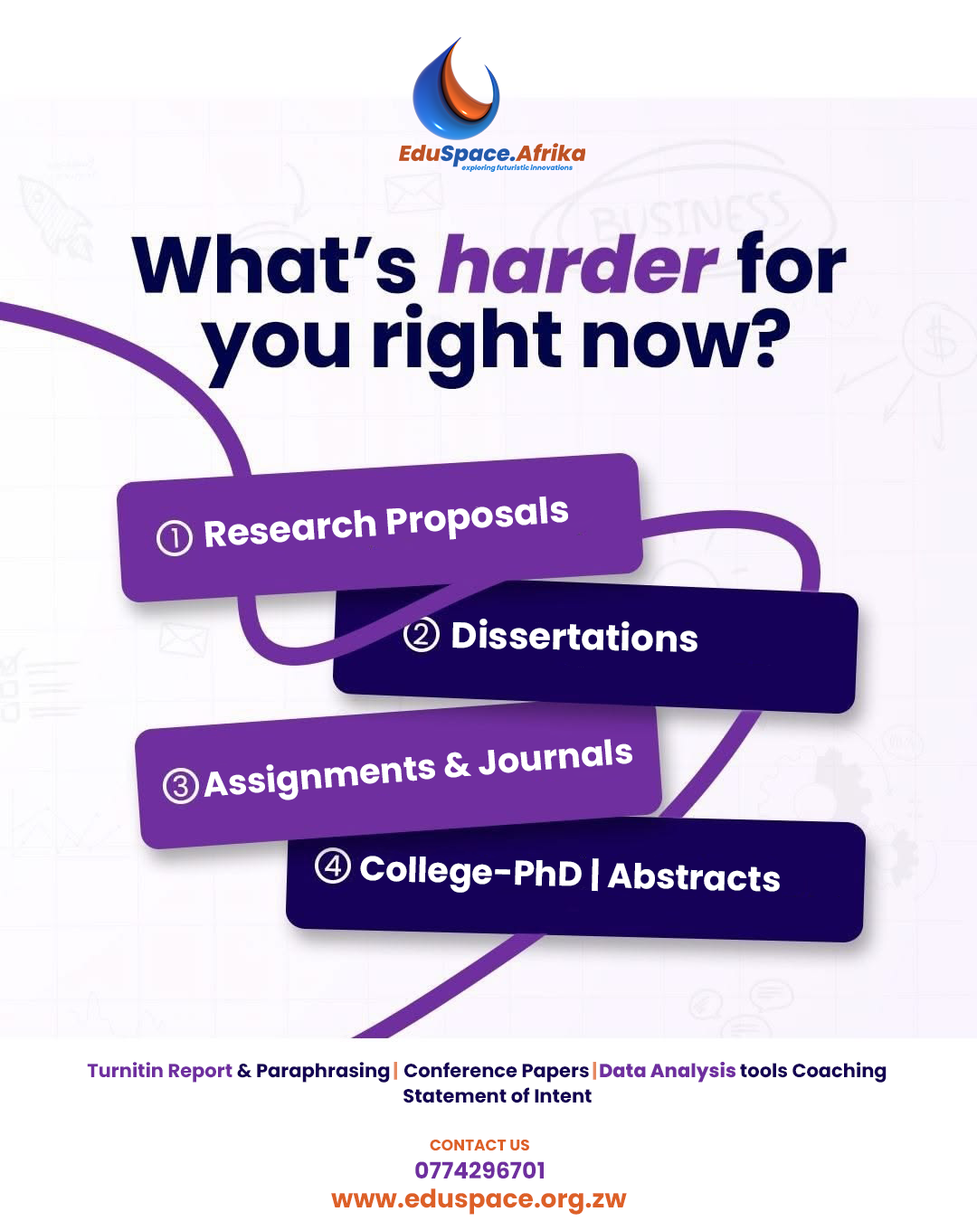
<style>
.page{position:relative;width:977px;height:1221px;background:#ffffff}
.page>*{position:absolute;margin:0}
.t1{font:36.2px "Poppins-Bold";color:#ffffff}
.t2{font:34.4px "Poppins-Bold";color:#ffffff}
.t3{font:19px "Poppins-Bold";color:#6f2f9f}
.t4{font:19px "Poppins-Bold";color:#140153}
.t5{font:19px "Poppins-Bold";color:#e58961}
.t6{font:19px "Poppins-ExtraBold";color:#6f2f9f}
.t7{font:15.4px "Poppins-Bold";color:#dd6027}
.t8{font:22.6px "Poppins-Bold";color:#6f2f9f}
.t9{font:25.3px "Poppins-Bold";color:#dd6027}
</style>
<div class="page">
<p class="t1" style="left:204px;top:496px;width:364px;height:51px;rotate:-4deg">Research Proposals</p>
<p class="t1" style="left:452px;top:619px;width:245px;height:33px;rotate:1deg">Dissertations</p>
<p class="t2" style="left:203px;top:739px;width:429px;height:61px;rotate:-5deg">Assignments &amp; Journals</p>
<p class="t2" style="left:360px;top:856px;width:420px;height:37px;rotate:2deg">College-PhD | Abstracts</p>
<p class="t3" style="left:87px;top:1062px;width:303px;height:21px">Turnitin Report<span class="t4"> &amp; Paraphrasing</span></p>
<p class="t5" style="left:393px;top:1062px;width:4px;height:18px">|</p>
<p class="t4" style="left:404px;top:1062px;width:185px;height:21px">Conference Papers</p>
<p class="t5" style="left:592px;top:1062px;width:4px;height:18px">|</p>
<p class="t4" style="left:600px;top:1062px;width:286px;height:21px"><span class="t6">Data Analysis </span>tools Coaching</p>
<p class="t4" style="left:403px;top:1087px;width:188px;height:16px">Statement of Intent</p>
<p class="t7" style="left:430px;top:1139px;width:99px;height:11px">CONTACT US</p>
<p class="t8" style="left:415px;top:1161px;width:129px;height:17px">0774296701</p>
<p class="t9" style="left:331px;top:1188px;width:296px;height:27px">www.eduspace.org.zw</p>
</div>
